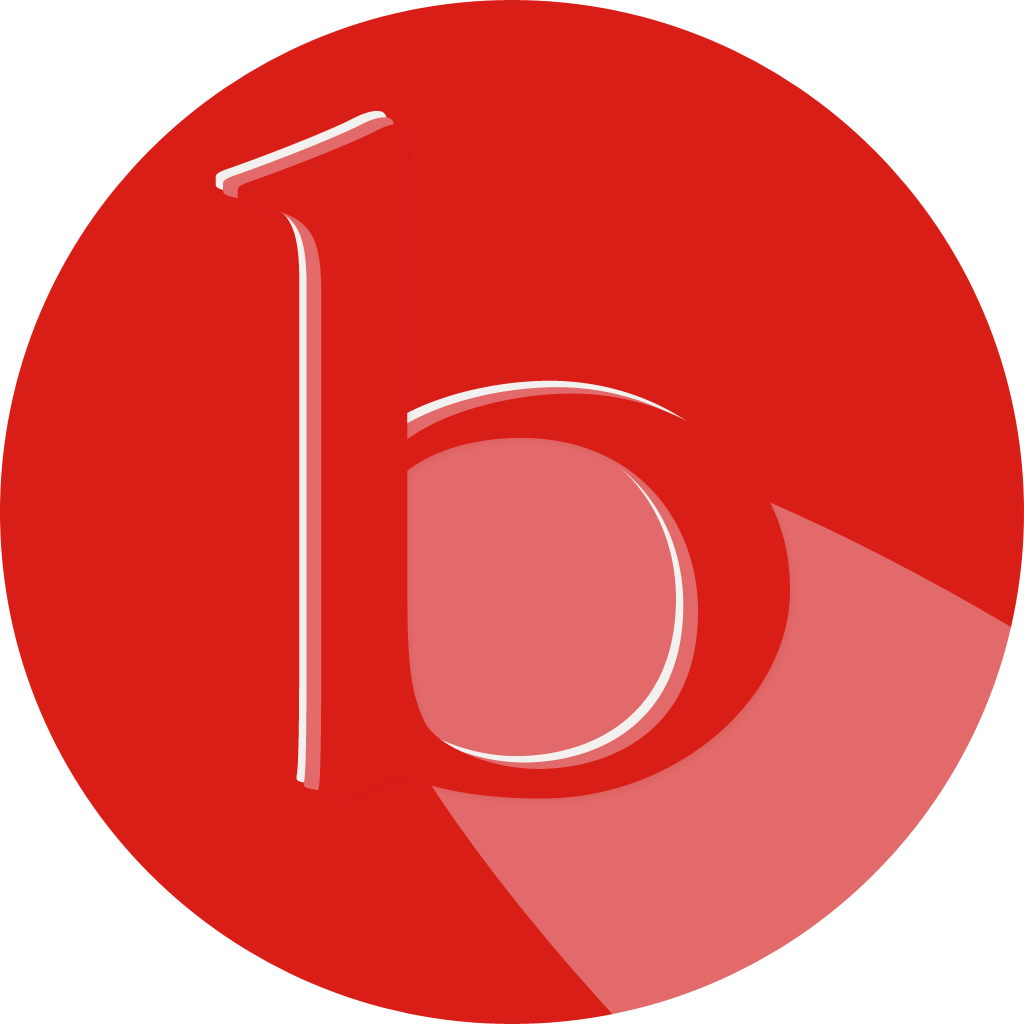
<style>
.page{position:relative;width:1024px;height:1024px;background:#d91e18}
.page>*{position:absolute;margin:0}
.t1{font:917.7px "ACaslonPro-Regular";color:#d11913;scale:1.3 1}
</style>
<div class="page">
<p class="t1" style="left:237px;top:123px;width:553px;height:676px">b</p>
</div>
